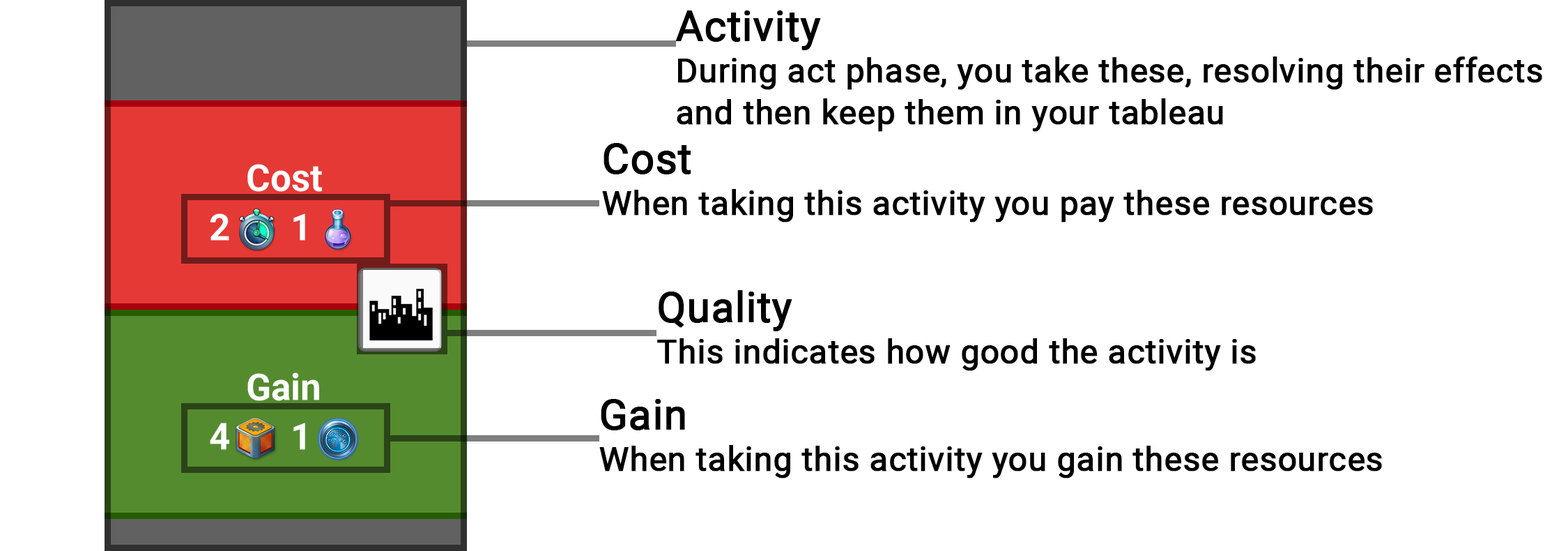
<style>
.page{position:relative;width:1568px;height:551px;background:#ffffff}
.page>*{position:absolute;margin:0}
.t1{font:33.5px/41.8px "Roboto-Regular";color:#000000;font-weight:bold}
.t2{font:41.8px/41.8px "Roboto-Regular";color:#000000;font-weight:bold}
</style>
<div class="page">
<p class="t1" style="left:675px;top:10px;width:867px;height:122px"><span class="t2">Activity<br></span>During act phase, you take these, resolving their effects<br>and then keep them in your tableau</p>
<p class="t1" style="left:602px;top:143px;width:771px;height:79px"><span class="t2">Cost<br></span>When taking this activity you pay these resources</p>
<p class="t1" style="left:657px;top:290px;width:599px;height:81px"><span class="t2">Quality<br></span>This indicates how good the activity is</p>
<p class="t1" style="left:599px;top:399px;width:783px;height:79px"><span class="t2">Gain<br></span>When taking this activity you gain these resources</p>
</div>
